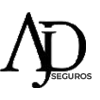
<style>
.page{position:relative;width:100px;height:100px;background:#ffffff}
.page>*{position:absolute;margin:0}
.t1{font:8px "MontserratRoman-SemiBold";color:#4b4b4b}
</style>
<div class="page">
<p class="t1" style="left:51px;top:73px;width:41px;height:7px">SEGUROS</p>
</div>
